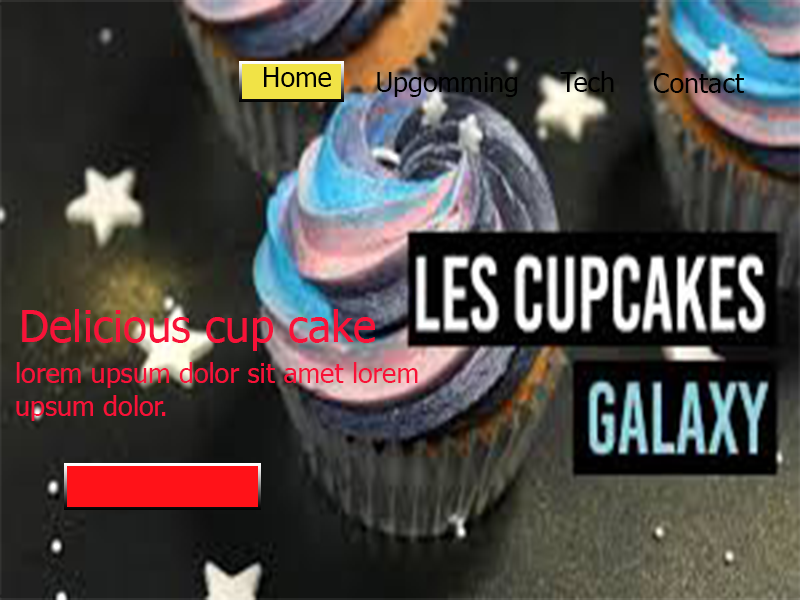
<style>
.page{position:relative;width:800px;height:600px}
.page>*{position:absolute;margin:0}
.t1{font:27px "Tahoma";color:#000000}
.t2{font:44px "Tahoma";color:#f81238}
.t3{font:27px "Tahoma";color:#f81238}
</style>
<div class="page">
<p class="t1" style="left:264px;top:67px;width:67px;height:20px">Home</p>
<p class="t1" style="left:377px;top:72px;width:141px;height:25px">Upgomming</p>
<p class="t1" style="left:560px;top:71px;width:54px;height:21px">Tech</p>
<p class="t1" style="left:653px;top:73px;width:91px;height:20px">Contact</p>
<p class="t2" style="left:22px;top:309px;width:353px;height:42px">Delicious cup cake</p>
<p class="t3" style="left:16px;top:362px;width:402px;height:59px"><span class="t2"><br></span>lorem upsum dolor sit amet lorem<br>upsum dolor.</p>
</div>
